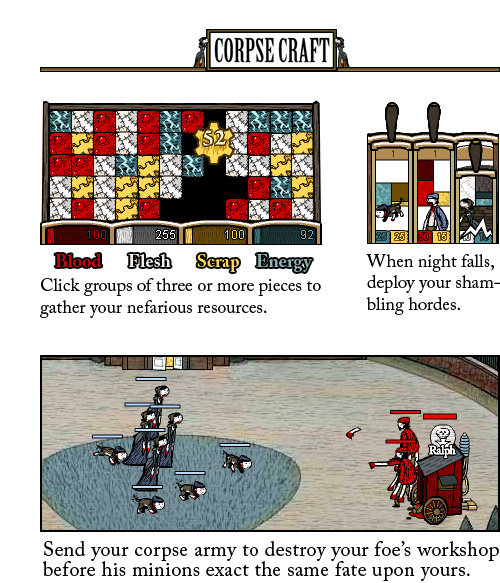
<style>
.page{position:relative;width:500px;height:583px;background:#ffffff}
.page>*{position:absolute;margin:0}
.t1{font:18px "ACaslonPro-Bold";color:#cc0000}
.t2{font:18px "ACaslonPro-Bold";color:#f9f1e9}
.t3{font:18px "ACaslonPro-Bold";color:#ffd858}
.t4{font:18px "ACaslonPro-Regular";color:#000000}
.t5{font:18px/21.5px "ACaslonPro-Regular";color:#000000}
.t6{font:18px/22px "ACaslonPro-Regular";color:#000000}
.t7{font:20px/20px "ACaslonPro-Regular";letter-spacing:0.025em;color:#000000}
.t8{font:20px/12px "ACaslonPro-Regular";letter-spacing:0.025em;color:#000000}
</style>
<div class="page">
<p class="t1" style="left:55px;top:254px;width:47px;height:13px">Blood</p>
<p class="t2" style="left:128px;top:254px;width:43px;height:13px">Flesh</p>
<p class="t3" style="left:197px;top:254px;width:42px;height:18px"><span class="t4"> </span>Scrap</p>
<p class="t5" style="left:366px;top:254px;width:134px;height:61px">When night falls, deploy your shambling hordes.</p>
<p class="t6" style="left:40px;top:278px;width:281px;height:40px">Click groups of three or more pieces to gather your nefarious resources.</p>
<p class="t7" style="left:42px;top:541px;width:457px;height:40px"><span class="t8">Send your c</span>orpse army to destroy your foe’s workshop before his minions exact the same fate upon yours.</p>
</div>
